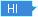
<style>
.page{position:relative;width:38px;height:17px;background:#3c89dc}
.page>*{position:absolute;margin:0}
.t1{font:12px "Dotum";color:#fbfcfd}
</style>
<div class="page">
<p class="t1" style="left:8px;top:4px;width:9px;height:9px">HI</p>
</div>
